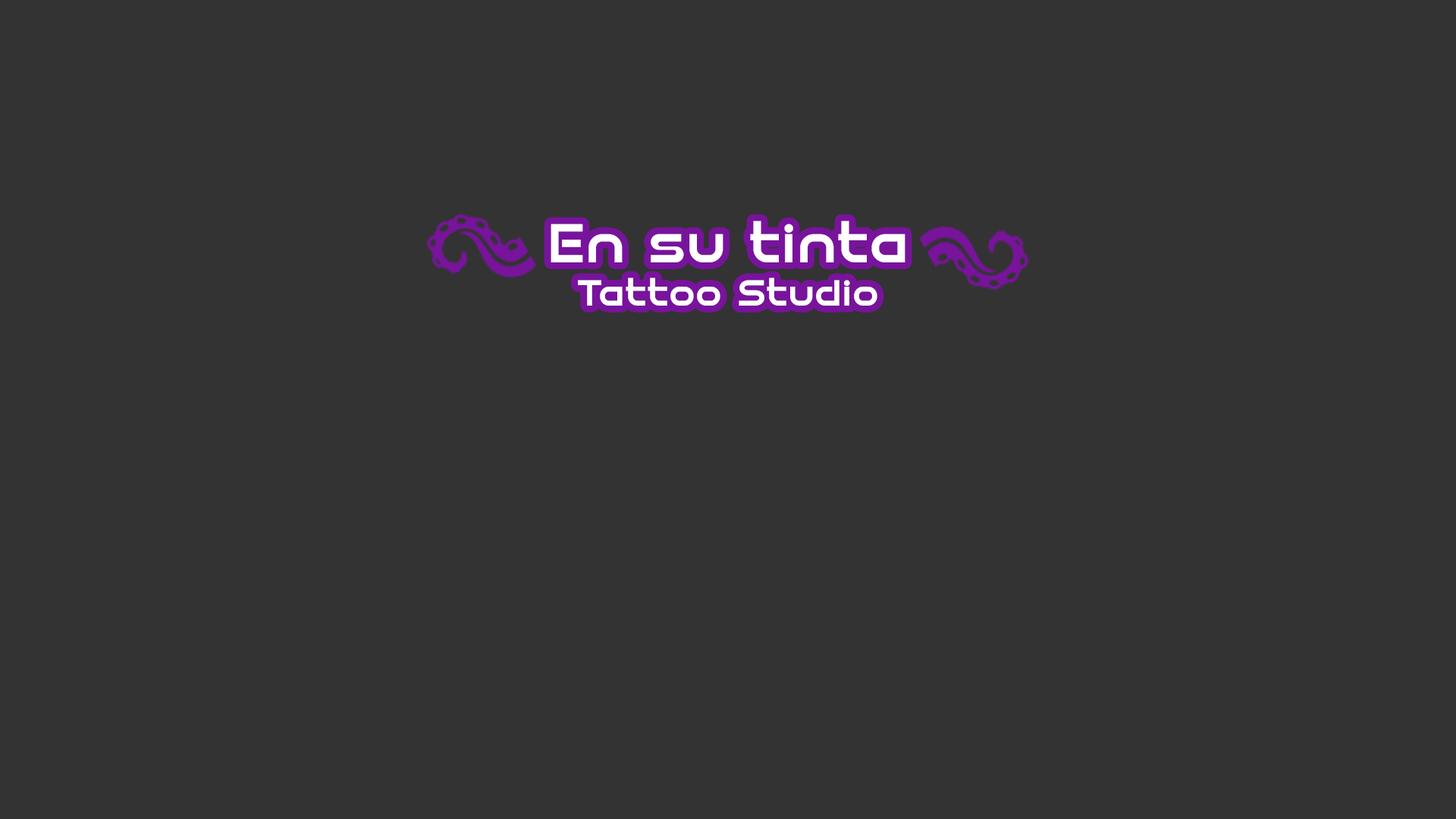
<style>
.page{position:relative;width:1456px;height:819px;background:#333333}
.page>*{position:absolute;margin:0}
.t1{font:36.4px "Speedy-Regular";color:#ffffff}
.t2{font:54.6px "Speedy-Regular";color:#ffffff}
</style>
<div class="page">
<p class="t1" style="left:551px;top:221px;width:354px;height:85px;text-align:center"><span class="t2">En su tinta<br></span>Tattoo Studio</p>
</div>
